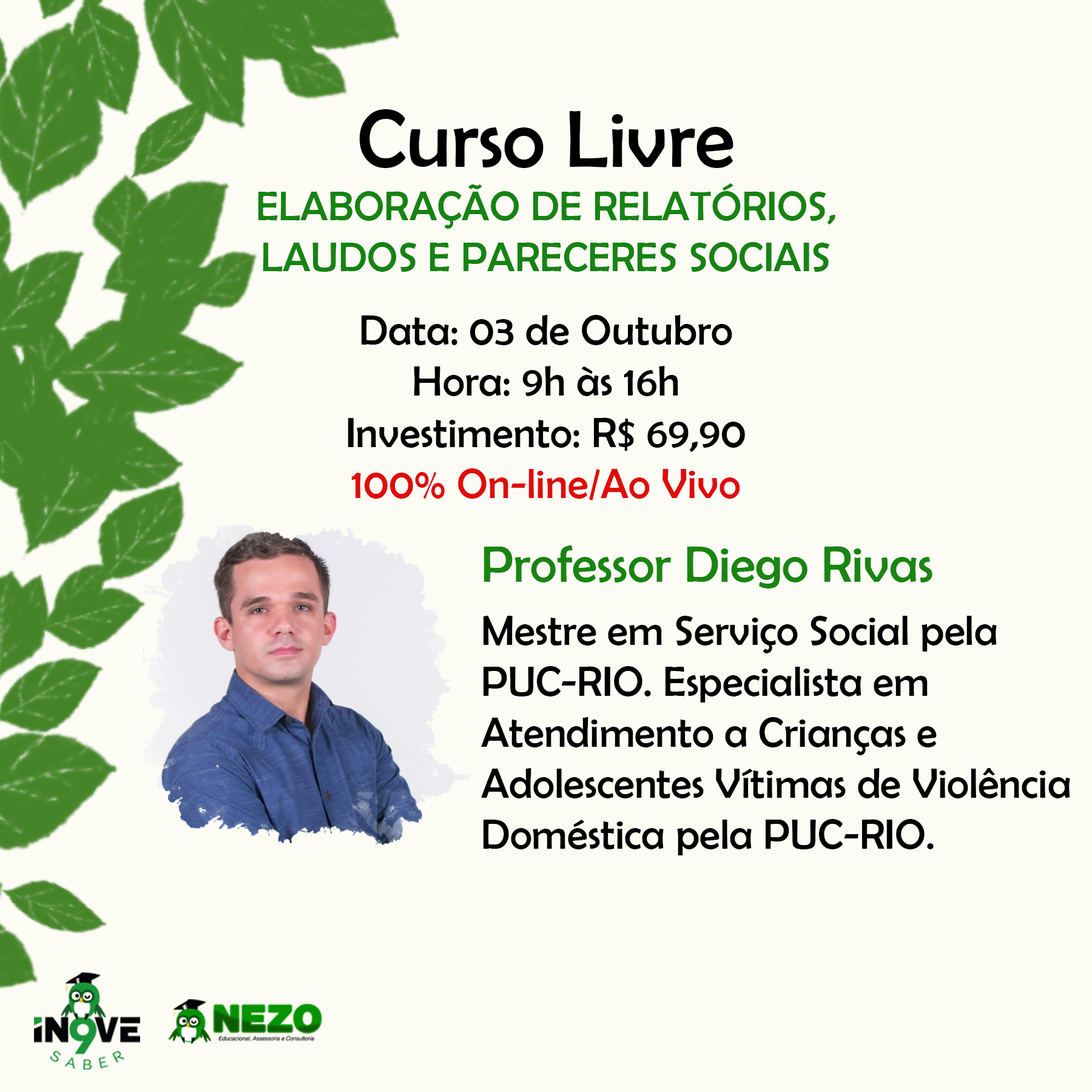
<style>
.page{position:relative;width:1092px;height:1092px;background:#fcfcf5}
.page>*{position:absolute;margin:0}
.t1{font:42.1px "BerlinSansFB-Reg";color:#168313}
.t2{font:82.2px "BerlinSansFB-Reg";color:#000000}
.t3{font:42.1px/53.4px "BerlinSansFB-Reg";color:#168313}
.t4{font:42.7px "BerlinSansFB-Reg";color:#000000}
.t5{font:42.7px "BerlinSansFB-Reg";color:#df0c0c}
.t6{font:42.5px "BerlinSansFB-Reg";color:#000000}
.t7{font:51.6px "BerlinSansFB-Reg";color:#198511}
.t8{font:42.5px/63.1px "BerlinSansFB-Reg";color:#000000}
</style>
<div class="page">
<p class="t1" style="left:258px;top:109px;width:577px;height:163px;text-align:center"><span class="t2">Curso Livre<br></span><span class="t3">ELABORAÇÃO DE RELATÓRIOS, </span>LAUDOS E PARECERES SOCIAIS</p>
<p class="t4" style="left:348px;top:315px;width:397px;height:185px;text-align:center">Data: 03 de Outubro<br>Hora: 9h às 16h<br>Investimento: R$ 69,90<br><span class="t5">100% On-line/Ao Vivo</span></p>
<p class="t6" style="left:481px;top:545px;width:589px;height:310px"><span class="t7">Professor Diego Rivas<br></span><span class="t8">Mestre em Serviço Social pela </span>PUC-RIO. Especialista em Atendimento a Crianças e Adolescentes Vítimas de Violência Doméstica pela PUC-RIO. <span class="t8">Graduação em Serviço Social pela UNIGRANRIO (2010).</span></p>
</div>
